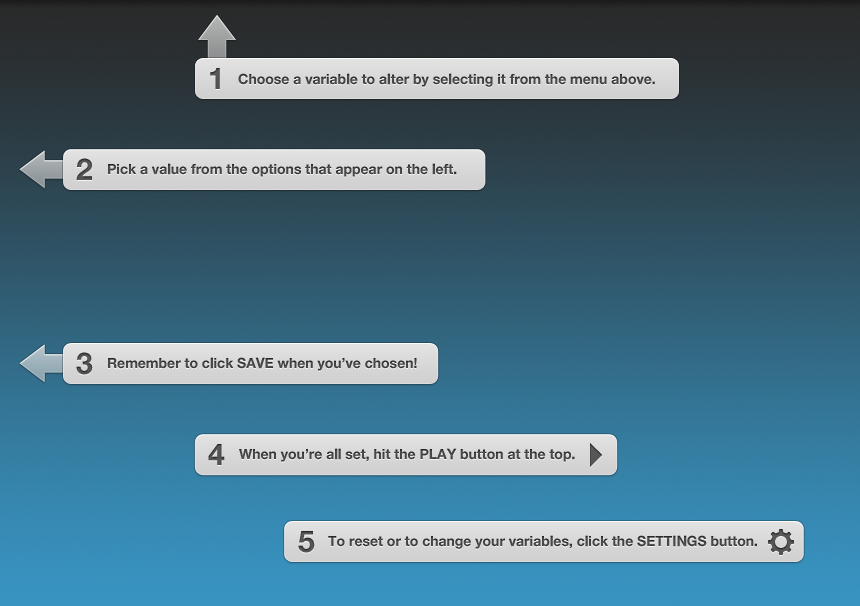
<style>
.page{position:relative;width:860px;height:606px}
.page>*{position:absolute;margin:0}
.t1{font:30px "HelveticaNeueBold";color:#525252}
.t2{font:14px "HelveticaNeueBold";color:#454545}
.t3{font:30px "HelveticaNeueBold";color:#515151}
.t4{font:30px "HelveticaNeueBold";color:#505050}
.t5{font:14px "HelveticaNeueBold";color:#444444}
.t6{font:14px "HelveticaNeueBold";color:#464646}
.t7{font:30px "HelveticaNeueBold";color:#4e4e4e}
.t8{font:14px "HelveticaNeueBold";color:#434343}
</style>
<div class="page">
<p class="t1" style="left:210px;top:68px;width:10px;height:21px">1</p>
<p class="t2" style="left:238px;top:73px;width:417px;height:14px">Choose a variable to alter by selecting it from the menu above.</p>
<p class="t3" style="left:76px;top:158px;width:16px;height:22px">2</p>
<p class="t2" style="left:108px;top:163px;width:349px;height:14px">Pick a value from the options that appear on the left.</p>
<p class="t4" style="left:76px;top:352px;width:17px;height:23px">3</p>
<p class="t5" style="left:108px;top:357px;width:309px;height:14px">Remember to click SAVE when you’ve chosen!</p>
<p class="t3" style="left:208px;top:444px;width:17px;height:21px">4</p>
<p class="t6" style="left:239px;top:448px;width:336px;height:14px">When you’re all set, hit the PLAY button at the top.</p>
<p class="t7" style="left:298px;top:531px;width:17px;height:22px">5</p>
<p class="t8" style="left:328px;top:535px;width:429px;height:14px">To reset or to change your variables, click the SETTINGS button.</p>
</div>
